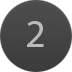
<style>
.page{position:relative;width:72px;height:72px}
.page>*{position:absolute;margin:0}
.t1{font:40px "MyriadPro-Regular";color:#bcbcbc;font-variant:small-caps}
</style>
<div class="page">
<p class="t1" style="left:27px;top:21px;width:17px;height:26px">2</p>
</div>
